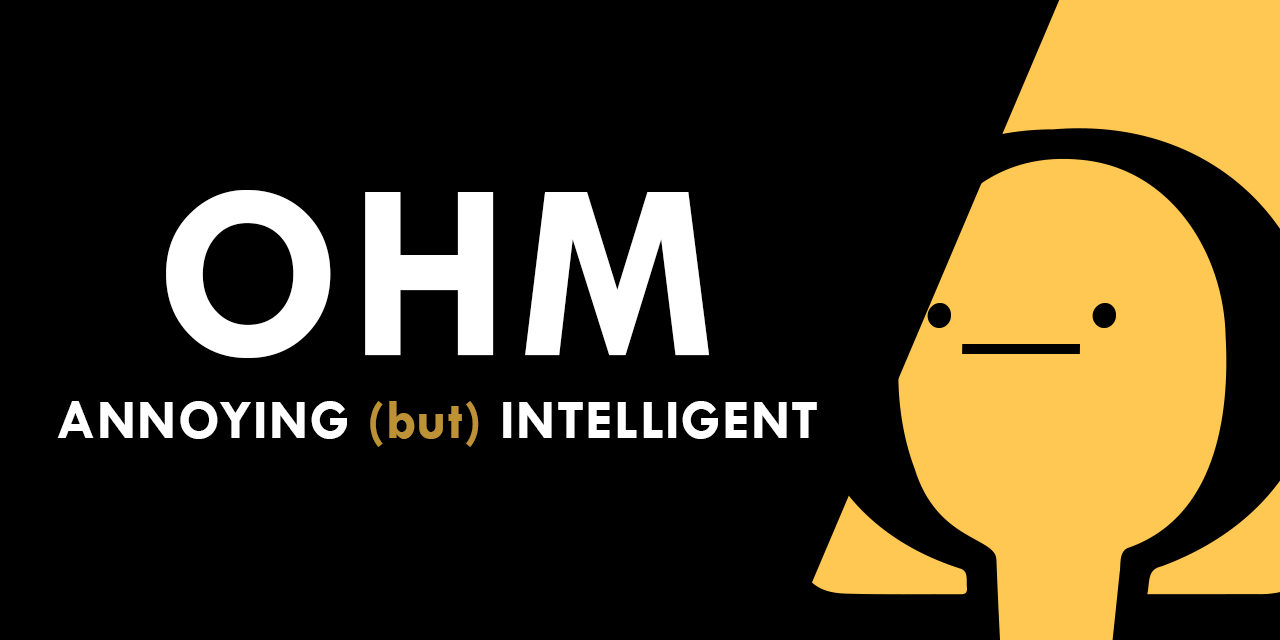
<style>
.page{position:relative;width:1280px;height:640px;background:#000000}
.page>*{position:absolute;margin:0}
.t1{font:254.2px "TwCenMT-Bold";letter-spacing:0.025em;color:#ffffff}
.t2{font:56px "TwCenMT-Bold";letter-spacing:0.025em;color:#ffffff}
.t3{font:56px "TwCenMT-Bold";letter-spacing:0.025em;color:#bd9236}
</style>
<div class="page">
<p class="t1" style="left:166px;top:190px;width:543px;height:168px">OHM</p>
<p class="t2" style="left:57px;top:401px;width:760px;height:46px">ANNOYING <span class="t3">(but) </span>INTELLIGENT</p>
</div>
